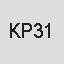
<style>
.page{position:relative;width:64px;height:64px;background:#dddddd}
.page>*{position:absolute;margin:0}
.t1{font:20px "ArialMT";letter-spacing:-0.04em;color:#222222;scale:0.97 1}
</style>
<div class="page">
<p class="t1" style="left:10px;top:23px;width:40px;height:15px">KP31</p>
</div>
